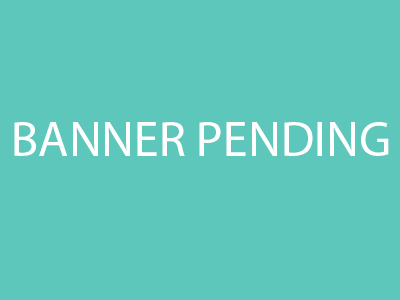
<style>
.page{position:relative;width:400px;height:300px;background:#5ec7bc}
.page>*{position:absolute;margin:0}
.t1{font:50px "MyriadPro-Regular";color:#ffffff}
</style>
<div class="page">
<p class="t1" style="left:14px;top:122px;width:375px;height:34px">BANNER PENDING</p>
</div>
